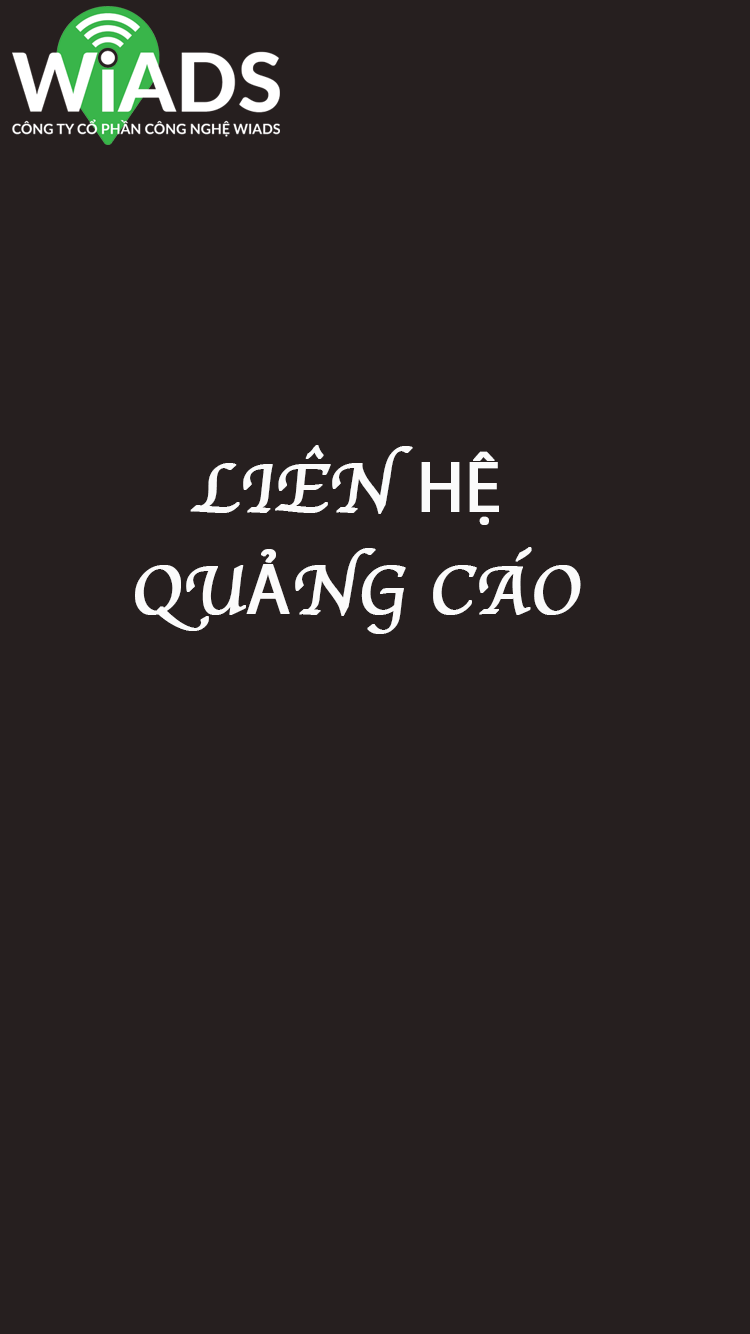
<style>
.page{position:relative;width:750px;height:1334px;background:#261f1f}
.page>*{position:absolute;margin:0}
.t1{font:72px "Apple-Chancery";color:#fbfbfb;font-weight:bold}
.t2{font:72px "MyriadPro-Regular";color:#fbfbfb;font-weight:bold}
</style>
<div class="page">
<p class="t1" style="left:135px;top:445px;width:446px;height:189px;text-align:center">LIÊN <span class="t2">HỆ <br></span>QU<span class="t2">Ả</span>NG CÁO</p>
</div>
